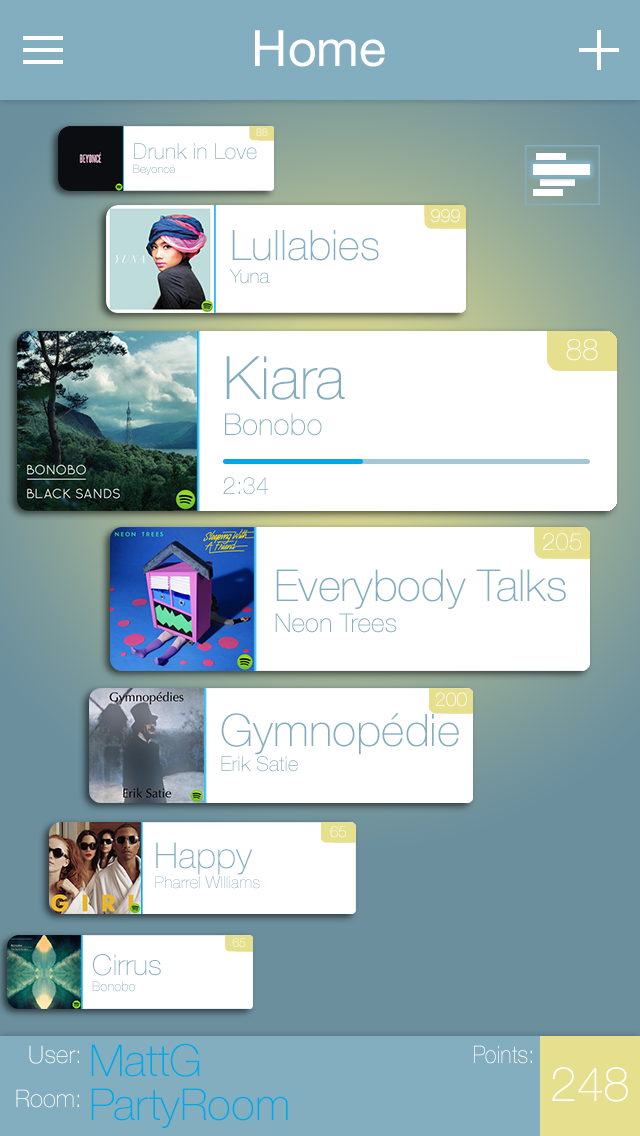
<style>
.page{position:relative;width:640px;height:1136px;background:#ffffff}
.page>*{position:absolute;margin:0}
.t1{font:50px "HelveticaNeue";color:#ffffff}
.t2{font:10.8px "HelveticaNeue-Thin"}
.t3{font:22px "HelveticaNeue-Thin";color:#83aebf}
.t4{font:11.5px "HelveticaNeue-Thin";color:#83aebf}
.t5{font:18px "HelveticaNeue-Thin"}
.t6{font:42px "HelveticaNeue-Thin";color:#83aebf}
.t7{font:19.2px "HelveticaNeue-Thin";color:#83aebf}
.t8{font:30px "HelveticaNeue-Thin";color:#ffffff}
.t9{font:30px "HelveticaNeue-Thin";color:#83aebf}
.t10{font:60px "HelveticaNeue-Thin";color:#83aebf}
.t11{font:24px "HelveticaNeue-Thin";color:#83aebf}
.t12{font:24px "HelveticaNeue-Thin";color:#ffffff}
.t13{font:44px "HelveticaNeue-Thin";color:#83aebf}
.t14{font:26px "HelveticaNeue-Thin";color:#83aebf}
.t15{font:19.2px "HelveticaNeue-Thin";color:#ffffff}
.t16{font:44.8px "HelveticaNeue-Thin";color:#83aebf}
.t17{font:20.5px "HelveticaNeue-Thin";color:#83aebf}
.t18{font:15.4px "HelveticaNeue-Thin"}
.t19{font:16.4px "HelveticaNeue-Thin";color:#83aebf}
.t20{font:35.9px "HelveticaNeue-Thin";color:#83aebf}
.t21{font:12.3px "HelveticaNeue-Thin"}
.t22{font:28.7px "HelveticaNeue-Thin";color:#83aebf}
.t23{font:13.1px "HelveticaNeue-Thin";color:#83aebf}
.t24{font:44px "HelveticaNeue-Thin";color:#00a9e5}
.t25{font:24px "HelveticaNeue-Thin";color:#ffffff;scale:0.92 1}
.t26{font:48px "HelveticaNeue-Thin";color:#ffffff}
</style>
<div class="page">
<p class="t1" style="left:255px;top:30px;width:130px;height:37px">Home</p>
<p class="t2" style="left:256px;top:128px;width:12px;height:8px">88</p>
<p class="t3" style="left:133px;top:143px;width:124px;height:32px">Drunk in Love<br><span class="t4">Beyoncé</span></p>
<p class="t5" style="left:431px;top:209px;width:29px;height:14px">999</p>
<p class="t6" style="left:229px;top:230px;width:150px;height:54px">Lullabies<br><span class="t7">Yuna</span></p>
<p class="t8" style="left:566px;top:339px;width:32px;height:22px">88</p>
<p class="t9" style="left:225px;top:356px;width:120px;height:80px"><span class="t10">Kiara<br></span>Bonobo</p>
<p class="t11" style="left:223px;top:477px;width:46px;height:18px">2:34</p>
<p class="t12" style="left:543px;top:533px;width:38px;height:18px">205</p>
<p class="t13" style="left:275px;top:569px;width:291px;height:64px">Everybody Talks<br><span class="t14">Neon Trees</span></p>
<p class="t15" style="left:436px;top:692px;width:31px;height:15px">200</p>
<p class="t16" style="left:221px;top:713px;width:238px;height:59px">Gymnopédie<br><span class="t17">Erik Satie</span></p>
<p class="t18" style="left:330px;top:826px;width:16px;height:12px">65</p>
<p class="t19" style="left:155px;top:842px;width:105px;height:47px"><span class="t20">Happy<br></span>Pharrel WIlliams</p>
<p class="t21" style="left:232px;top:938px;width:14px;height:9px">65</p>
<p class="t22" style="left:92px;top:954px;width:69px;height:38px">Cirrus<br><span class="t23">Bonobo</span></p>
<p class="t12" style="left:16px;top:1045px;width:63px;height:63px;text-align:right">User:<br>Room:</p>
<p class="t24" style="left:91px;top:1043px;width:197px;height:85px">MattG<br>PartyRoom</p>
<p class="t25" style="left:474px;top:1045px;width:58px;height:19px">Points:</p>
<p class="t26" style="left:552px;top:1067px;width:76px;height:35px">248</p>
</div>
